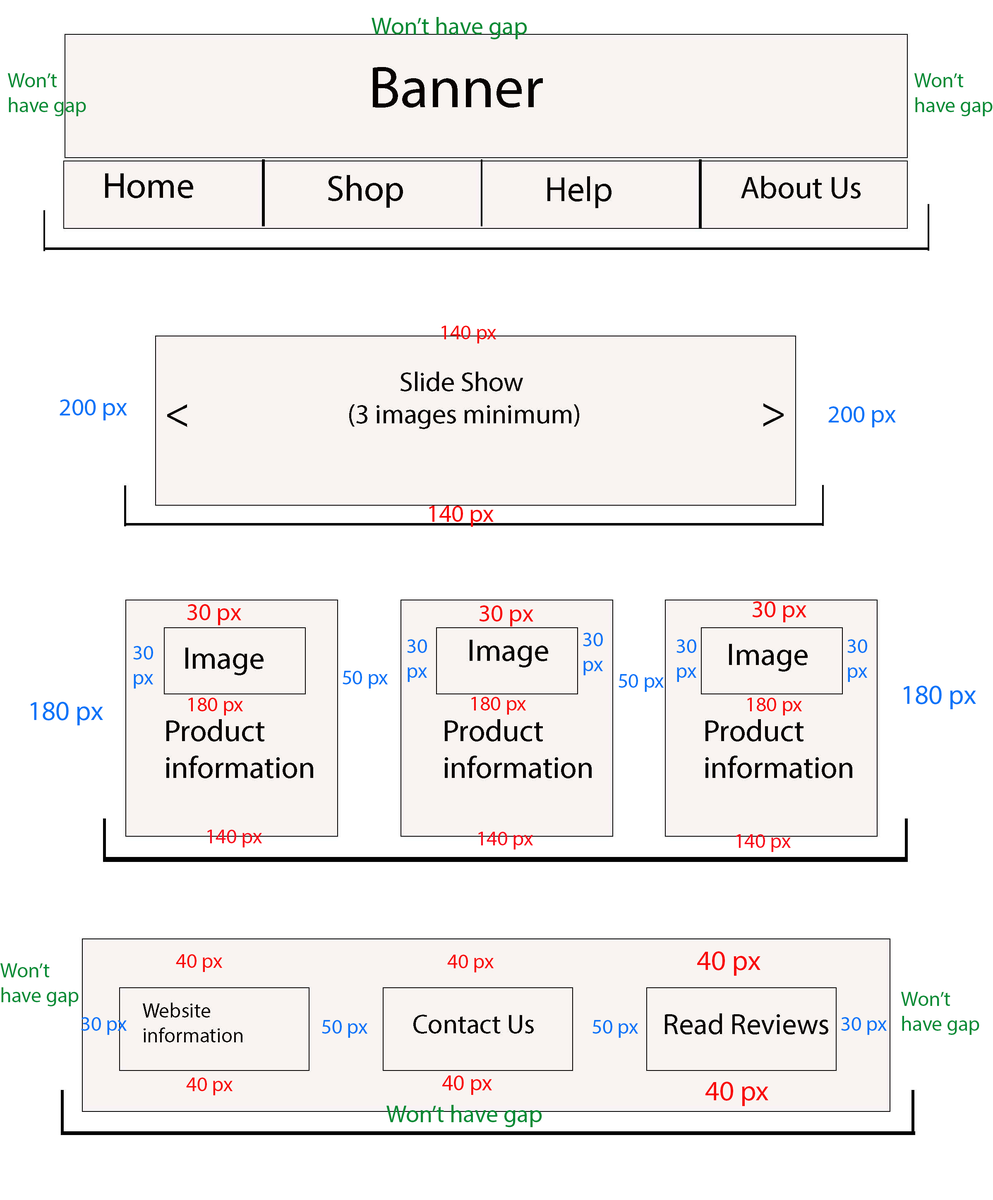
<style>
.page{position:relative;width:993px;height:1200px;background:#ffffff}
.page>*{position:absolute;margin:0}
.t1{font:24.3px "MyriadPro-Regular";color:#048b34}
.t2{font:20.7px "MyriadPro-Regular";color:#048b34}
.t3{font:20.7px "MyriadPro-Regular";color:#f80808}
.t4{font:24.7px "MyriadPro-Regular";color:#0873f8}
.t5{font:24.4px "MyriadPro-Regular";color:#f80808}
.t6{font:20.7px "MyriadPro-Regular";color:#0873f8}
.t7{font:27.3px "MyriadPro-Regular";color:#0873f8}
.t8{font:20.7px "MyriadPro-Regular";color:#f80819}
.t9{font:28.2px "MyriadPro-Regular";color:#f80808}
.t10{font:22.4px "MyriadPro-Regular";color:#f80808}
</style>
<div class="page">
<p class="t1" style="left:372px;top:17px;width:155px;height:22px">Won’t have gap</p>
<p class="t2" style="left:7px;top:73px;width:79px;height:43px">Won’t            have gap</p>
<p class="t2" style="left:914px;top:73px;width:79px;height:43px">Won’t            have gap</p>
<p class="t3" style="left:442px;top:326px;width:55px;height:18px">140 px</p>
<p class="t4" style="left:60px;top:399px;width:67px;height:22px">200 px</p>
<p class="t4" style="left:829px;top:406px;width:67px;height:22px">200 px</p>
<p class="t5" style="left:429px;top:506px;width:65px;height:21px">140 px</p>
<p class="t5" style="left:187px;top:604px;width:54px;height:21px">30 px</p>
<p class="t5" style="left:479px;top:606px;width:55px;height:21px">30 px</p>
<p class="t5" style="left:752px;top:601px;width:55px;height:22px">30 px</p>
<p class="t6" style="left:407px;top:640px;width:21px;height:42px">30<br>px</p>
<p class="t6" style="left:583px;top:633px;width:20px;height:43px">30<br>px</p>
<p class="t6" style="left:677px;top:640px;width:20px;height:42px">30<br>px</p>
<p class="t6" style="left:848px;top:640px;width:20px;height:42px">30<br>px</p>
<p class="t6" style="left:133px;top:646px;width:21px;height:43px">30<br>px</p>
<p class="t6" style="left:343px;top:671px;width:45px;height:18px">50 px</p>
<p class="t6" style="left:619px;top:674px;width:45px;height:18px">50 px</p>
<p class="t7" style="left:904px;top:686px;width:72px;height:23px">180 px</p>
<p class="t3" style="left:188px;top:698px;width:55px;height:18px">180 px</p>
<p class="t3" style="left:471px;top:697px;width:56px;height:18px">180 px</p>
<p class="t3" style="left:748px;top:698px;width:55px;height:18px">180 px</p>
<p class="t7" style="left:30px;top:702px;width:73px;height:24px">180 px</p>
<p class="t8" style="left:207px;top:830px;width:55px;height:18px">140 px</p>
<p class="t8" style="left:478px;top:832px;width:56px;height:18px">140 px</p>
<p class="t8" style="left:736px;top:834px;width:55px;height:18px">140 px</p>
<p class="t9" style="left:697px;top:952px;width:64px;height:24px">40 px</p>
<p class="t2" style="left:0px;top:964px;width:79px;height:43px">Won’t            have gap</p>
<p class="t3" style="left:176px;top:954px;width:47px;height:18px">40 px</p>
<p class="t3" style="left:447px;top:955px;width:47px;height:18px">40 px</p>
<p class="t2" style="left:901px;top:992px;width:79px;height:43px">Won’t            have gap</p>
<p class="t6" style="left:81px;top:1017px;width:46px;height:18px">30 px</p>
<p class="t6" style="left:322px;top:1020px;width:46px;height:18px">50 px</p>
<p class="t6" style="left:593px;top:1020px;width:46px;height:18px">50 px</p>
<p class="t6" style="left:841px;top:1017px;width:46px;height:18px">30 px</p>
<p class="t3" style="left:186px;top:1078px;width:47px;height:18px">40 px</p>
<p class="t10" style="left:442px;top:1076px;width:50px;height:19px">40 px</p>
<p class="t9" style="left:706px;top:1082px;width:63px;height:24px">40 px</p>
<p class="t1" style="left:387px;top:1105px;width:155px;height:23px">Won’t have gap</p>
</div>
